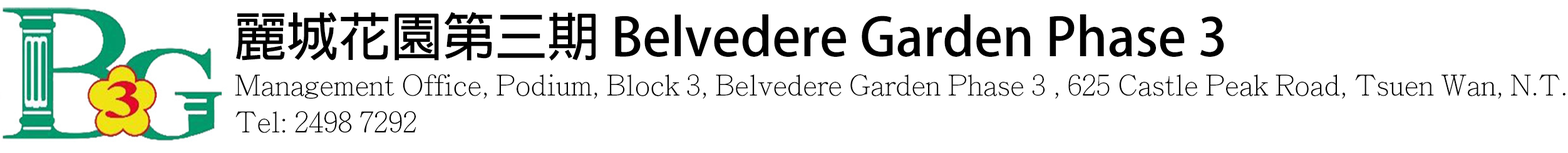
<style>
.page{position:relative;width:1568px;height:153px;background:#ffffff}
.page>*{position:absolute;margin:0}
.t1{font:52.2px "AdobeFanHeitiStd-Bold";color:#000000}
.t2{font:28.7px "AdobeMingStd-Light";color:#000000}
</style>
<div class="page">
<p class="t1" style="left:235px;top:12px;width:989px;height:49px">麗城花園第三期 Belvedere Garden Phase 3</p>
<p class="t2" style="left:235px;top:74px;width:1330px;height:25px">Management Office, Podium, Block 3, Belvedere Garden Phase 3 , 625 Castle Peak Road, Tsuen Wan, N.T.</p>
<p class="t2" style="left:235px;top:111px;width:181px;height:22px">Tel: 2498 7292</p>
</div>
